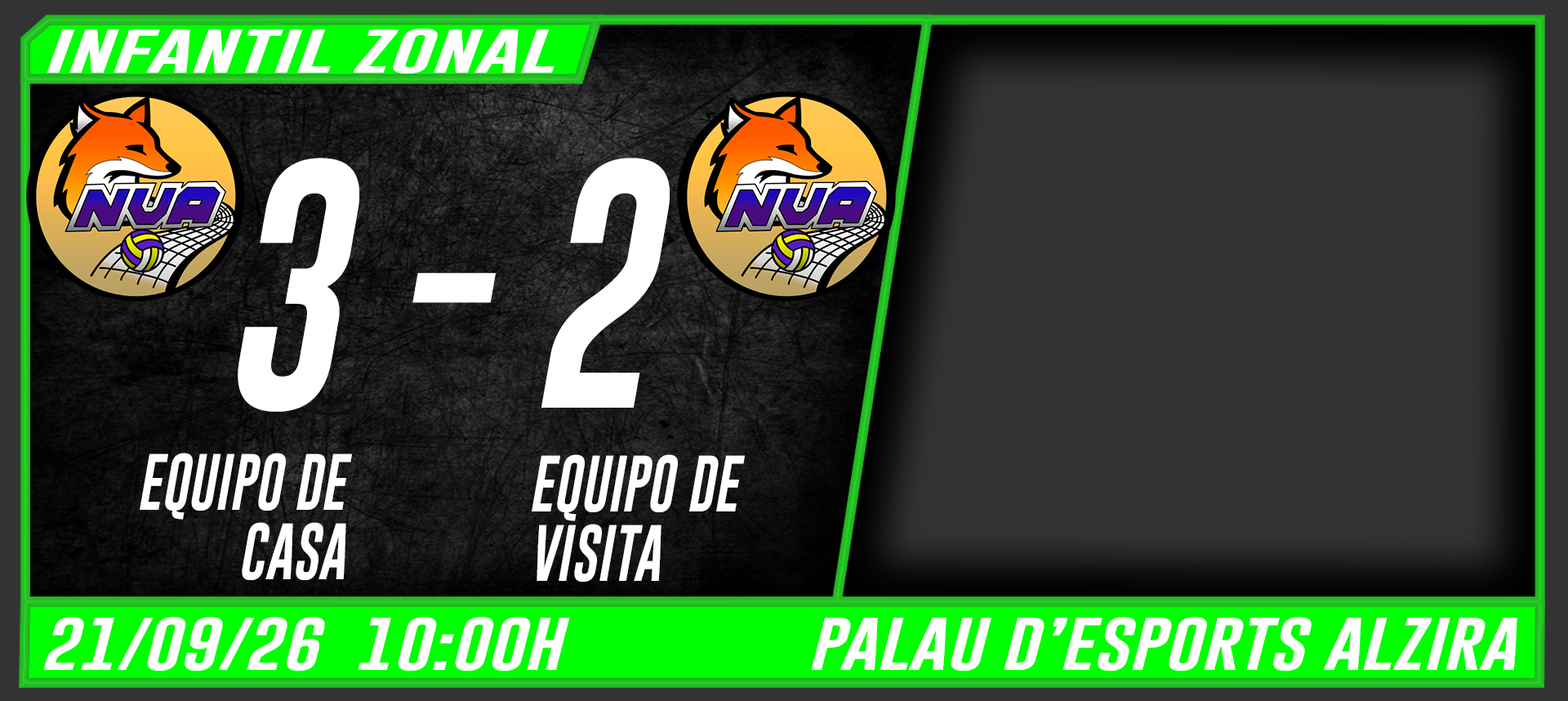
<style>
.page{position:relative;width:1568px;height:701px;background:#333333}
.page>*{position:absolute;margin:0}
.t1{font:45.2px "GoboldUplowItalic-Italic";color:#ffffff;scale:1.86 1}
.t2{font:256.2px "GoboldUplowItalic-Italic";letter-spacing:0.22em;color:#ffffff;scale:0.9 1}
.t3{font:58.2px "GoboldUplowItalic-Italic";color:#ffffff;scale:0.9 1}
.t4{font:54.3px "GoboldUplowItalic-Italic";color:#ffffff;scale:1.33 1}
</style>
<div class="page">
<p class="t1" style="left:47px;top:29px;width:508px;height:45px">INFANTIL ZONAL</p>
<p class="t2" style="left:238px;top:158px;width:121px;height:254px">3</p>
<p class="t2" style="left:541px;top:158px;width:129px;height:250px">2</p>
<p class="t2" style="left:412px;top:273px;width:84px;height:30px">-</p>
<p class="t3" style="left:140px;top:452px;width:212px;height:128px;text-align:right">EQUIPO DE<br>CASA</p>
<p class="t3" style="left:532px;top:454px;width:213px;height:127px">EQUIPO DE<br>VISITA</p>
<p class="t4" style="left:43px;top:617px;width:527px;height:53px">21/09/26  10:00H</p>
<p class="t4" style="left:811px;top:617px;width:706px;height:53px">PALAU D’ESPORTS ALZIRA</p>
</div>
